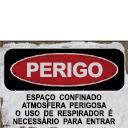
<style>
.page{position:relative;width:128px;height:128px;background:#ffffff}
.page>*{position:absolute;margin:0}
.t1{font:20px "MHeiPRC-Xbold";letter-spacing:-0.04em;color:#cecbce}
.t2{font:8px/8px "Arial-BoldMT";color:#000000;text-transform:uppercase;scale:0.88 1}
</style>
<div class="page">
<p class="t1" style="left:27px;top:62px;width:76px;height:16px">PERIGO</p>
<p class="t2" style="left:13px;top:94px;width:103px;height:31px;text-align:center">ESPAçO  CONFINADO<br>atmosfera  perigosa<br>o  uso  de  respirador  é<br>necessário  para  entrar</p>
</div>
